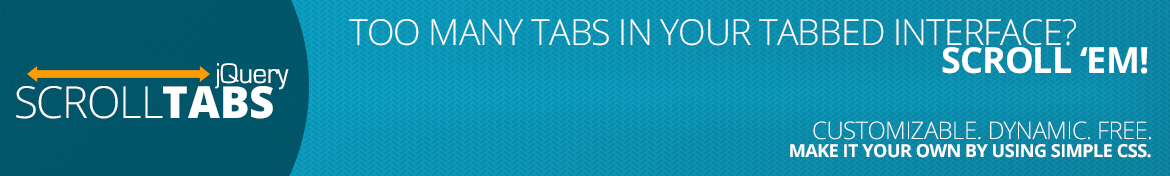
<style>
.page{position:relative;width:1170px;height:176px}
.page>*{position:absolute;margin:0}
.t1{font:36px "OpenSans-Light";letter-spacing:-0.025em;color:#ffffff;text-transform:uppercase}
.t2{font:36px "OpenSans-Bold";letter-spacing:-0.025em;color:#ffffff;text-transform:uppercase}
.t3{font:29.5px "EurostileRegular";letter-spacing:-0.025em;color:#ffffff}
.t4{font:44.2px "OpenSans-Light";letter-spacing:-0.025em;color:#ffffff;text-transform:uppercase}
.t5{font:44.2px "OpenSans-Extrabold";color:#ffffff;text-transform:uppercase}
.t6{font:24px "OpenSans-Light";letter-spacing:-0.025em;color:#ffffff;text-transform:uppercase}
.t7{font:18px "OpenSans-Bold";letter-spacing:-0.025em;color:#ffffff;text-transform:uppercase}
</style>
<div class="page">
<p class="t1" style="left:349px;top:19px;width:727px;height:27px">Too Many Tabs in Your Tabbed Interface?</p>
<p class="t2" style="left:942px;top:47px;width:206px;height:27px">Scroll ‘Em!</p>
<p class="t3" style="left:215px;top:63px;width:74px;height:27px">jQuery</p>
<p class="t4" style="left:16px;top:86px;width:257px;height:33px">Scroll<span class="t5">Tabs</span></p>
<p class="t6" style="left:813px;top:121px;width:338px;height:19px">CUSTOMIZABLE. DYNAMIC. FREE.</p>
<p class="t7" style="left:790px;top:144px;width:361px;height:14px">MAKE IT YOUR OWN BY USING SIMPLE CSS.</p>
</div>
